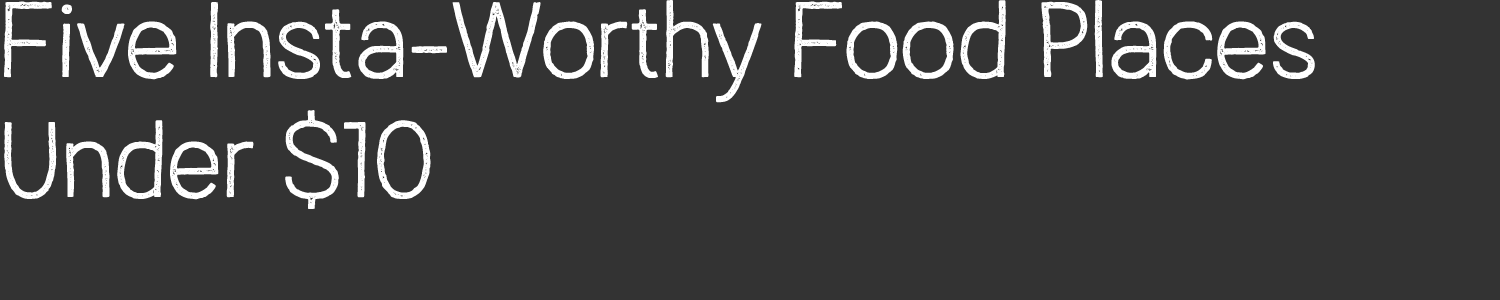
<style>
.page{position:relative;width:1500px;height:300px;background:#333333}
.page>*{position:absolute;margin:0}
.t1{font:100px "AustralSansStamp-Light";color:#ffffff}
</style>
<div class="page">
<p class="t1" style="left:4px;top:0px;width:1311px;height:209px">Five Insta-Worthy Food Places <br>Under $10</p>
</div>
